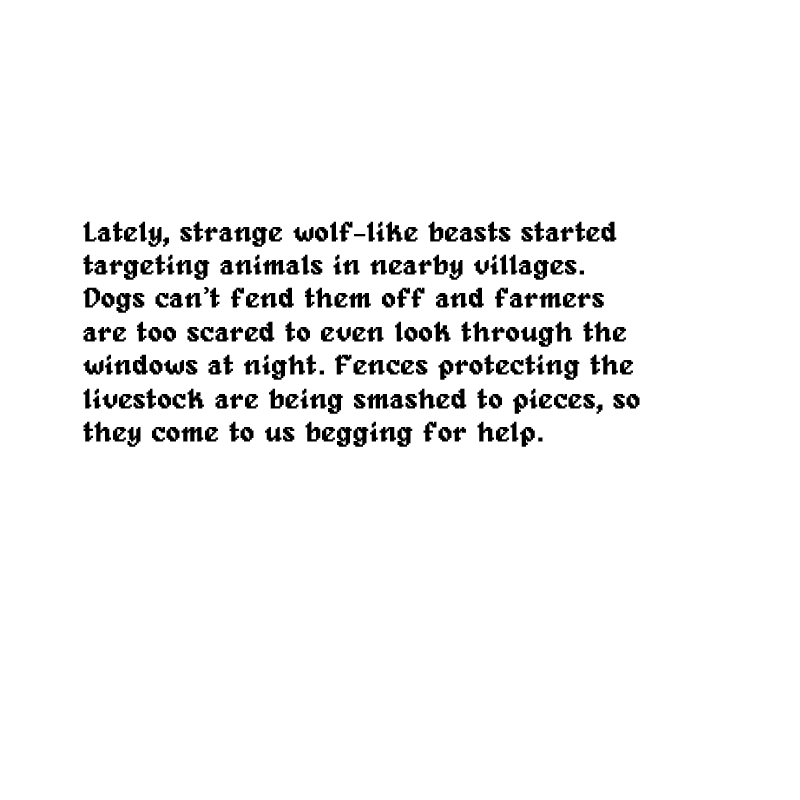
<style>
.page{position:relative;width:800px;height:800px;background:#ffffff}
.page>*{position:absolute;margin:0}
.t1{font:27.9px "Alagard";color:#000000;font-weight:bold}
.t2{font:27.9px "MinionPro-Regular";color:#000000;font-weight:bold}
</style>
<div class="page">
<p class="t1" style="left:83px;top:221px;width:557px;height:226px">Lately, strange wolf-like beasts started <br>targeting animals in nearby villages. <br>Dogs can<span class="t2">’</span>t fend them off and farmers <br>are too scared to even look through the<br>windows at night. Fences protecting the <br>livestock are being smashed to pieces, so <br>they come to us begging for help.</p>
</div>
